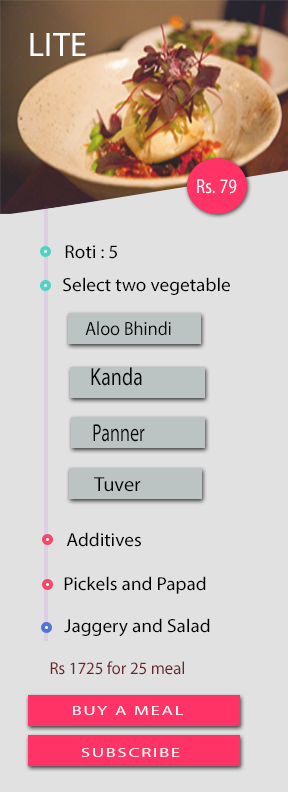
<style>
.page{position:relative;width:288px;height:792px;background:#e2e1e1}
.page>*{position:absolute;margin:0}
.t1{font:34px "MyriadPro-Regular";letter-spacing:0.015em;color:#ffffff}
.t2{font:20.2px "MyriadPro-Regular";letter-spacing:0.015em;color:#ffffff;scale:0.82 1}
.t3{font:18.8px "MyriadPro-Regular";color:#000000}
.t4{font:19.3px "MyriadPro-Regular";color:#070707;scale:0.93 1}
.t5{font:24.8px "MyriadPro-Regular";color:#060606;scale:0.81 1}
.t6{font:24.8px "MyriadPro-Regular";color:#040404;scale:0.73 1}
.t7{font:20.2px "MyriadPro-Regular";color:#030303}
.t8{font:17.5px "MyriadPro-Regular";color:#6a2626;scale:0.96 1}
.t9{font:12.9px "MyriadPro-Regular";letter-spacing:0.1em;color:#ffffff;scale:1.43 1}
</style>
<div class="page">
<p class="t1" style="left:30px;top:33px;width:56px;height:23px">LITE</p>
<p class="t2" style="left:197px;top:179px;width:40px;height:15px">Rs. 79</p>
<p class="t3" style="left:65px;top:245px;width:52px;height:14px">Roti : 5</p>
<p class="t3" style="left:63px;top:277px;width:167px;height:18px">Select two vegetable</p>
<p class="t4" style="left:85px;top:321px;width:86px;height:15px">Aloo Bhindi</p>
<p class="t5" style="left:91px;top:367px;width:51px;height:19px">Kanda</p>
<p class="t6" style="left:93px;top:424px;width:52px;height:18px">Panner</p>
<p class="t7" style="left:94px;top:477px;width:47px;height:15px">Tuver</p>
<p class="t3" style="left:66px;top:532px;width:75px;height:15px">Additives</p>
<p class="t3" style="left:64px;top:576px;width:142px;height:18px">Pickels and Papad</p>
<p class="t3" style="left:64px;top:618px;width:146px;height:19px">Jaggery and Salad</p>
<p class="t8" style="left:50px;top:661px;width:134px;height:14px">Rs 1725 for 25 meal</p>
<p class="t9" style="left:73px;top:706px;width:110px;height:9px">BUY A MEAL</p>
<p class="t9" style="left:81px;top:748px;width:99px;height:9px">SUBSCRIBE</p>
</div>
